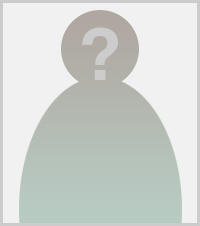
<style>
.page{position:relative;width:200px;height:226px;background:#f1f1f1}
.page>*{position:absolute;margin:0}
.t1{font:72px "Helvetica-Bold";color:#cccccc}
</style>
<div class="page">
<p class="t1" style="left:82px;top:27px;width:36px;height:53px">?</p>
</div>
